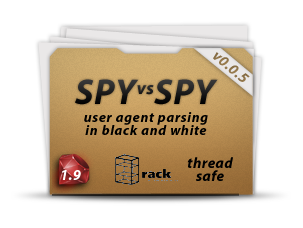
<style>
.page{position:relative;width:303px;height:228px;background:#ffffff}
.page>*{position:absolute;margin:0}
.t1{font:15px "MyriadPro-BoldIt";letter-spacing:0.025em;color:#90754a}
.t2{font:36px "MyriadPro-BoldIt";letter-spacing:0.025em}
.t3{font:18px "MyriadPro-BoldIt";letter-spacing:0.025em}
.t4{font:14px/13px "MyriadPro-BoldIt";letter-spacing:0.05em;color:#000000}
</style>
<div class="page">
<p class="t1" style="left:213px;top:52px;width:37px;height:30px;rotate:40deg">v0.0.5</p>
<p class="t2" style="left:75px;top:79px;width:143px;height:26px">SPY<span class="t3">vs</span>SPY</p>
<p class="t4" style="left:84px;top:112px;width:124px;height:23px;text-align:center">user agent parsing<br>in black and white</p>
</div>
